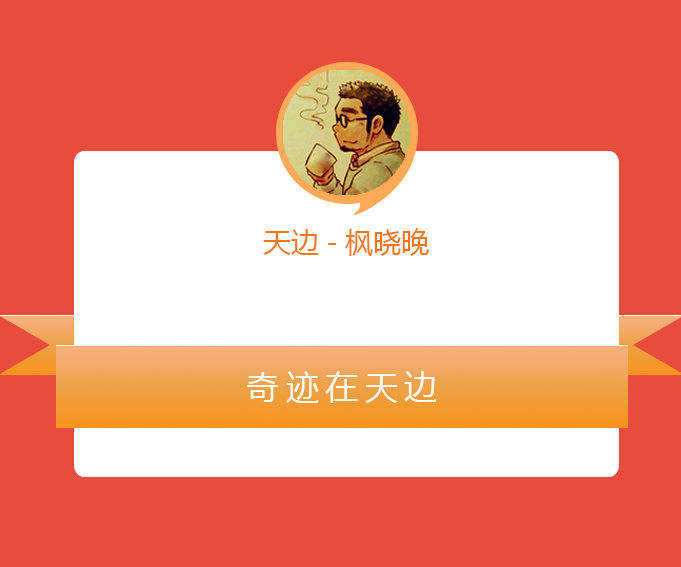
<style>
.page{position:relative;width:681px;height:567px;background:#e74c3c}
.page>*{position:absolute;margin:0}
.t1{font:28px "MicrosoftYaHei";color:#f6771a}
.t2{font:33px "MicrosoftYaHei";letter-spacing:0.2em;color:#ffffff}
</style>
<div class="page">
<p class="t1" style="left:263px;top:228px;width:166px;height:28px">天边-枫晓晚</p>
<p class="t2" style="left:246px;top:371px;width:191px;height:32px">奇迹在天边</p>
</div>
